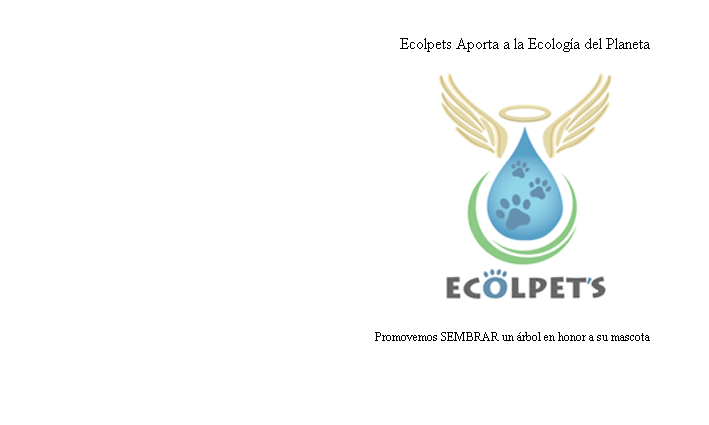
<style>
.page{position:relative;width:709px;height:425px;background:#ffffff}
.page>*{position:absolute;margin:0}
.t1{font:16px "TimesNewRomanPSMT";color:#000000}
.t2{font:12px "TimesNewRomanPSMT";color:#000000}
</style>
<div class="page">
<p class="t1" style="left:400px;top:38px;width:250px;height:14px">Ecolpets Aporta a la Ecología del Planeta</p>
<p class="t2" style="left:375px;top:332px;width:275px;height:9px">Promovemos SEMBRAR un árbol en honor a su mascota</p>
</div>
